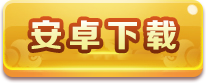
<style>
.page{position:relative;width:206px;height:83px}
.page>*{position:absolute;margin:0}
.t1{font:32px "FZZDHJW--GB1-0";letter-spacing:0.2em}
</style>
<div class="page">
<p class="t1" style="left:31px;top:20px;width:145px;height:30px">安卓下载</p>
</div>
